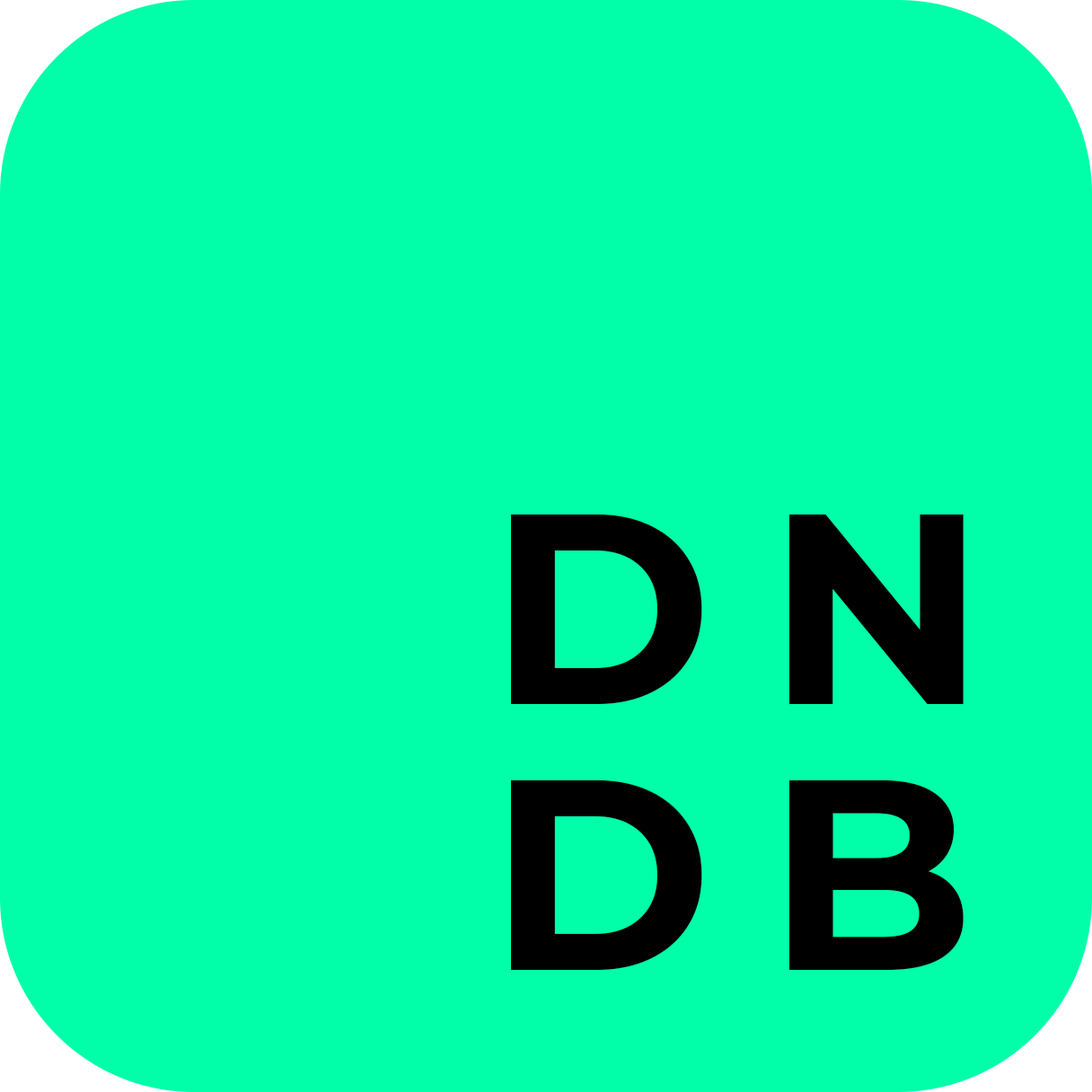
<style>
.page{position:relative;width:1092px;height:1092px;background:#00ffa8}
.page>*{position:absolute;margin:0}
.t1{font:270.9px/265.2px "Montserrat-Bold";letter-spacing:0.2em;color:#000000}
</style>
<div class="page">
<p class="t1" style="left:511px;top:514px;width:453px;height:456px">DN<br>DB</p>
</div>
